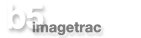
<style>
.page{position:relative;width:141px;height:38px;background:#ffffff}
.page>*{position:absolute;margin:0}
.t1{font:34px "Helvetica-Bold";letter-spacing:-0.015em;color:#ffffff}
.t2{font:14.6px "HelveticaNeue-Bold";color:#7c7c7c}
</style>
<div class="page">
<p class="t1" style="left:7px;top:3px;width:37px;height:26px">b5</p>
<p class="t2" style="left:32px;top:21px;width:70px;height:15px">imagetrac</p>
</div>
